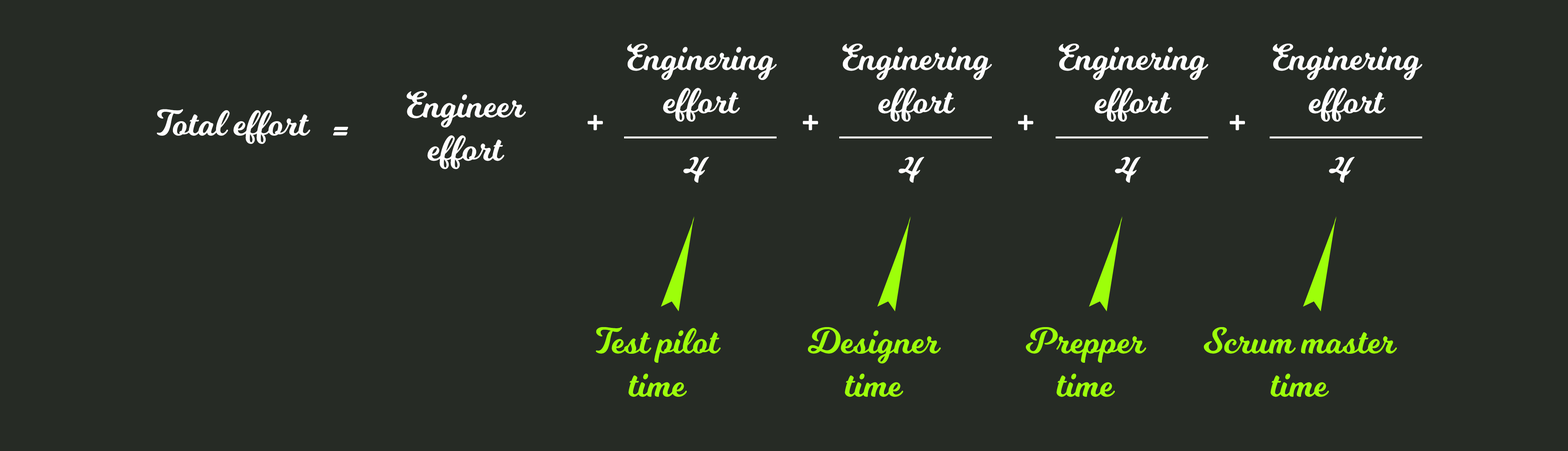
<style>
.page{position:relative;width:1568px;height:451px;background:#262b25}
.page>*{position:absolute;margin:0}
.t1{font:36.1px "Milkshake";color:#ffffff}
.t2{font:36.1px "Milkshake";color:#9dff0a}
</style>
<div class="page">
<p class="t1" style="left:627px;top:44px;width:150px;height:78px;text-align:center">Enginering<br>effort</p>
<p class="t1" style="left:842px;top:44px;width:150px;height:78px;text-align:center">Enginering<br>effort</p>
<p class="t1" style="left:1059px;top:44px;width:150px;height:78px;text-align:center">Enginering<br>effort</p>
<p class="t1" style="left:1273px;top:44px;width:150px;height:78px;text-align:center">Enginering<br>effort</p>
<p class="t1" style="left:407px;top:91px;width:119px;height:78px;text-align:center">Engineer<br>effort</p>
<p class="t1" style="left:157px;top:109px;width:153px;height:35px">Total effort</p>
<p class="t1" style="left:588px;top:115px;width:15px;height:16px">+</p>
<p class="t1" style="left:803px;top:115px;width:15px;height:16px">+</p>
<p class="t1" style="left:1018px;top:115px;width:15px;height:16px">+</p>
<p class="t1" style="left:1230px;top:115px;width:15px;height:16px">+</p>
<p class="t1" style="left:333px;top:127px;width:15px;height:9px">=</p>
<p class="t1" style="left:683px;top:157px;width:26px;height:26px">4</p>
<p class="t1" style="left:898px;top:157px;width:26px;height:26px">4</p>
<p class="t1" style="left:1115px;top:157px;width:26px;height:26px">4</p>
<p class="t1" style="left:1329px;top:157px;width:26px;height:26px">4</p>
<p class="t2" style="left:596px;top:327px;width:125px;height:70px;text-align:center">Test pilot<br>time</p>
<p class="t2" style="left:808px;top:327px;width:133px;height:70px;text-align:center">Designer<br>time</p>
<p class="t2" style="left:1026px;top:327px;width:120px;height:70px;text-align:center">Prepper<br>time</p>
<p class="t2" style="left:1204px;top:327px;width:193px;height:70px;text-align:center">Scrum master<br>time</p>
</div>
